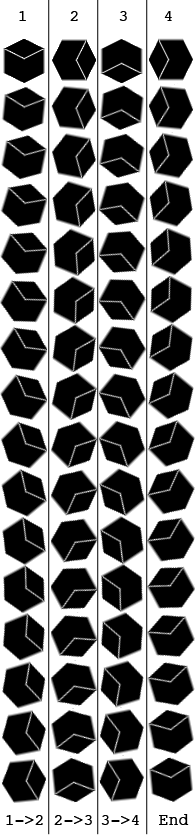
<style>
.page{position:relative;width:195px;height:835px;background:#000000}
.page>*{position:absolute;margin:0}
.t1{font:16.7px "Courier";color:#000000}
</style>
<div class="page">
<p class="t1" style="left:19px;top:11px;width:7px;height:10px">1</p>
<p class="t1" style="left:70px;top:11px;width:8px;height:10px">2</p>
<p class="t1" style="left:119px;top:11px;width:8px;height:10px">3</p>
<p class="t1" style="left:164px;top:11px;width:8px;height:10px">4</p>
<p class="t1" style="left:6px;top:815px;width:37px;height:10px">1-&gt;2</p>
<p class="t1" style="left:54px;top:815px;width:38px;height:10px">2-&gt;3</p>
<p class="t1" style="left:101px;top:815px;width:38px;height:10px">3-&gt;4</p>
<p class="t1" style="left:159px;top:814px;width:30px;height:11px">End</p>
</div>
